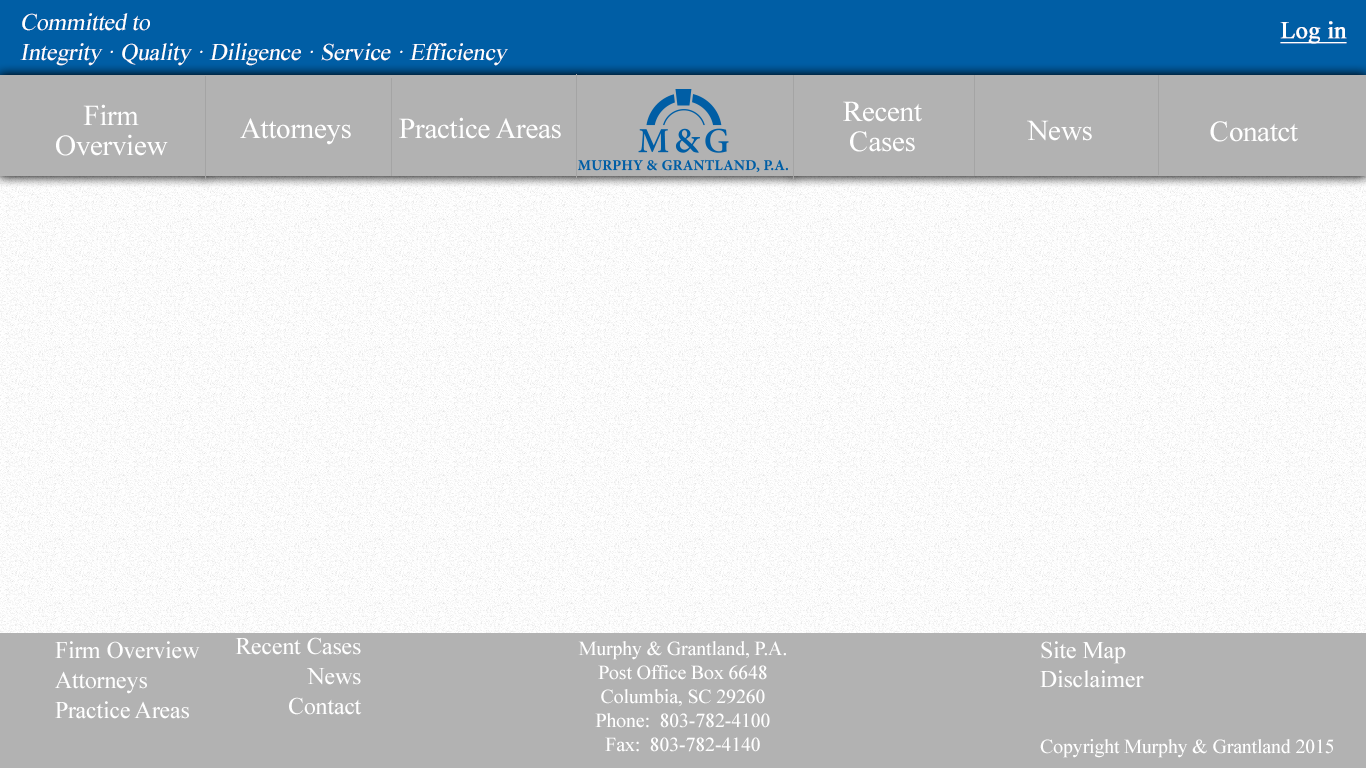
<style>
.page{position:relative;width:1366px;height:768px;background:#b2b2b2}
.page>*{position:absolute;margin:0}
.t1{font:24px/30px "TimesNewRomanPSMT";letter-spacing:-0.01em;color:#ffffff;font-style:italic}
.t2{font:24px "TimesNewRomanPSMT";letter-spacing:-0.01em;color:#ffffff;font-weight:bold;text-decoration:underline}
.t3{font:29px/30px "TimesNewRomanPSMT";letter-spacing:-0.01em;color:#ffffff}
.t4{font:29px "TimesNewRomanPSMT";letter-spacing:-0.01em;color:#ffffff}
.t5{font:24px/30px "TimesNewRomanPSMT";letter-spacing:-0.01em;color:#ffffff}
.t6{font:20px "TimesNewRomanPSMT";letter-spacing:-0.01em;color:#ffffff}
.t7{font:24px "TimesNewRomanPSMT";letter-spacing:-0.01em;color:#ffffff}
</style>
<div class="page">
<p class="t1" style="left:20px;top:13px;width:488px;height:53px">Committed to<br>Integrity · Quality · Diligence · Service · Efficiency</p>
<p class="t2" style="left:1280px;top:21px;width:67px;height:23px">Log in</p>
<p class="t3" style="left:843px;top:101px;width:79px;height:51px;text-align:center">Recent<br>Cases</p>
<p class="t3" style="left:56px;top:104px;width:112px;height:52px;text-align:center">Firm <br>Overview</p>
<p class="t4" style="left:240px;top:118px;width:111px;height:27px">Attorneys</p>
<p class="t4" style="left:399px;top:117px;width:162px;height:22px">Practice Areas</p>
<p class="t4" style="left:1027px;top:120px;width:65px;height:21px">News</p>
<p class="t4" style="left:1210px;top:121px;width:88px;height:21px">Conatct</p>
<p class="t5" style="left:55px;top:641px;width:145px;height:78px">Firm Overview<br>Attorneys<br>Practice Areas</p>
<p class="t5" style="left:235px;top:637px;width:127px;height:78px;text-align:right">Recent Cases<br>News<br>Contact</p>
<p class="t6" style="left:578px;top:641px;width:208px;height:111px;text-align:center">Murphy &amp; Grantland, P.A.<br>Post Office Box 6648<br>Columbia, SC 29260<br>Phone:  803-782-4100<br>Fax:  803-782-4140</p>
<p class="t7" style="left:1040px;top:641px;width:104px;height:47px">Site Map <br>Disclaimer</p>
<p class="t6" style="left:1040px;top:739px;width:294px;height:19px">Copyright Murphy &amp; Grantland 2015</p>
</div>
